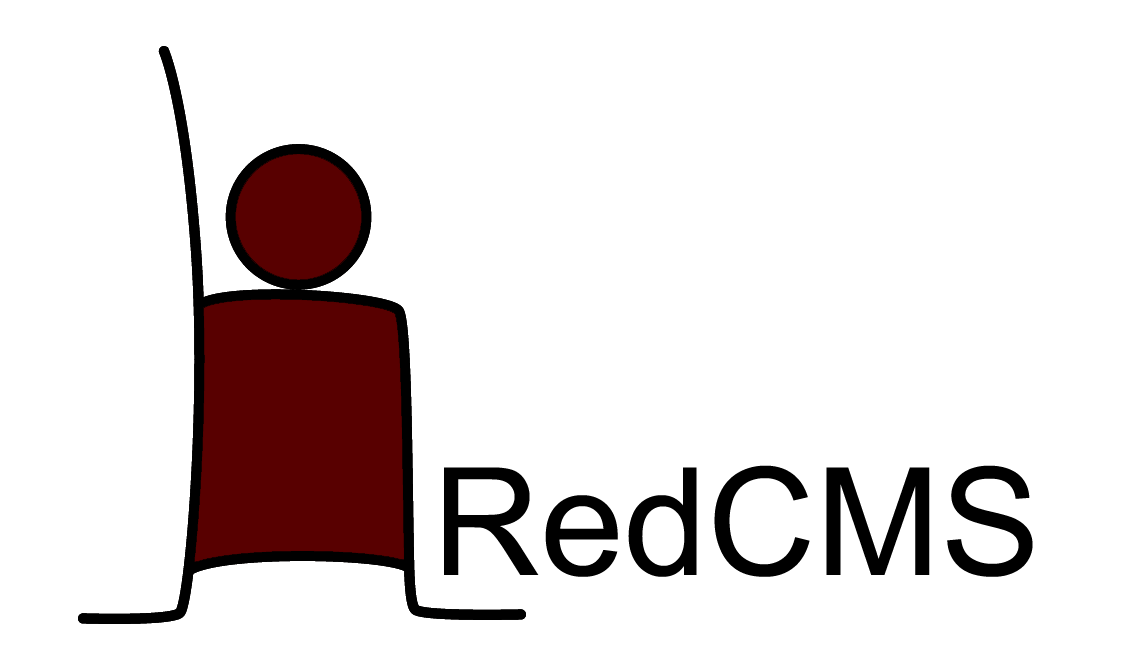
<style>
.page{position:relative;width:1137px;height:663px;background:#ffffff}
.page>*{position:absolute;margin:0}
.t1{font:150px "ArialMT";color:#000000}
</style>
<div class="page">
<p class="t1" style="left:444px;top:465px;width:589px;height:112px">RedCMS</p>
</div>
